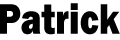
<style>
.page{position:relative;width:120px;height:40px;background:#ffffff}
.page>*{position:absolute;margin:0}
.t1{font:44.3px "FranklinGothic-Heavy";color:#000000;scale:0.82 1}
</style>
<div class="page">
<p class="t1" style="left:0px;top:3px;width:120px;height:32px">Patrick</p>
</div>
